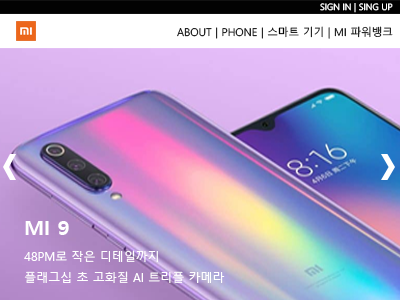
<style>
.page{position:relative;width:400px;height:300px}
.page>*{position:absolute;margin:0}
.t1{font:8.9px "MalgunGothic-Semilight";color:#ffffff}
.t2{font:10.7px "MalgunGothic";color:#000000}
.t3{font:20.4px "MalgunGothicBold";color:#ffffff}
.t4{font:12px "MalgunGothic";color:#ffffff}
</style>
<div class="page">
<p class="t1" style="left:320px;top:3px;width:73px;height:10px">SIGN IN | SING UP</p>
<p class="t2" style="left:177px;top:26px;width:216px;height:13px">ABOUT | PHONE | 스마트 기기 | MI 파워뱅크</p>
<p class="t3" style="left:25px;top:221px;width:44px;height:14px">MI 9</p>
<p class="t4" style="left:24px;top:250px;width:201px;height:33px">48PM로 작은 디테일까지<br>플래그십 초 고화질 AI 트리플 카메라</p>
</div>
